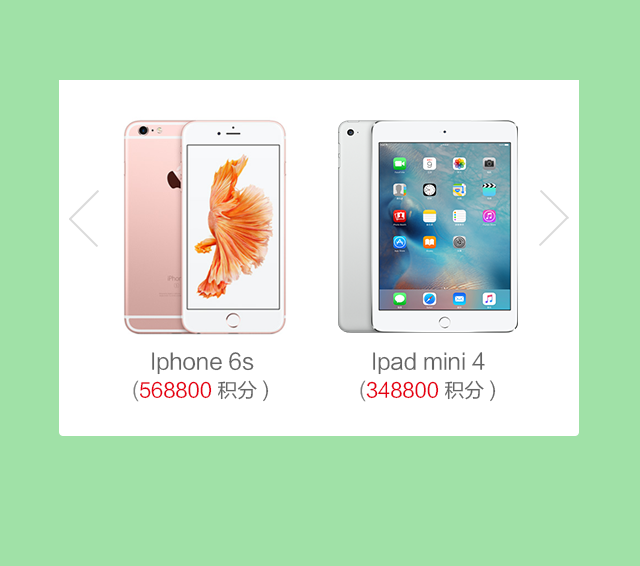
<style>
.page{position:relative;width:640px;height:566px;background:#a0e1a7}
.page>*{position:absolute;margin:0}
.t1{font:22px "FZLTHK--GBK1-0";color:#656565}
.t2{font:20px "FZLTHK--GBK1-0";color:#e60012}
.t3{font:20px "FZLTHK--GBK1-0";color:#7e7e7e}
.t4{font:20px "FZLTHK--GBK1-0";color:#656565}
</style>
<div class="page">
<p class="t1" style="left:152px;top:352px;width:102px;height:23px">Iphone 6s</p>
<p class="t1" style="left:373px;top:352px;width:112px;height:23px">Ipad mini 4</p>
<p class="t2" style="left:133px;top:380px;width:136px;height:22px"><span class="t3">(</span>568800<span class="t4"> 积分)</span></p>
<p class="t2" style="left:360px;top:380px;width:136px;height:22px"><span class="t3">(</span>348800<span class="t4"> 积分)</span></p>
</div>
